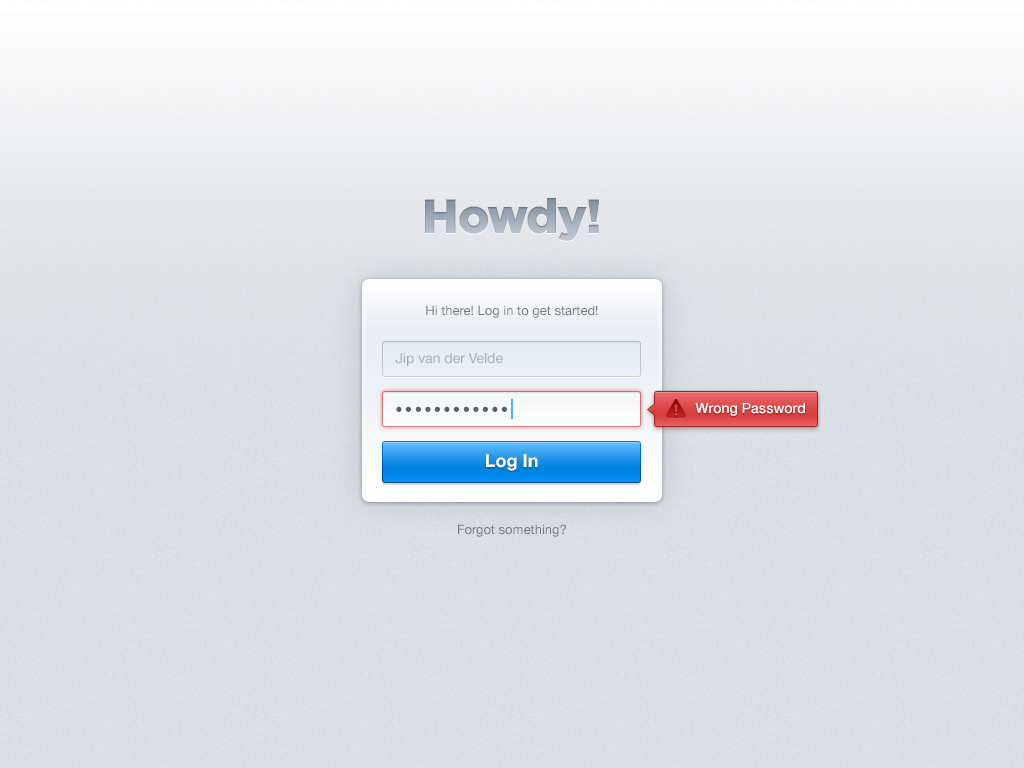
<style>
.page{position:relative;width:1024px;height:768px}
.page>*{position:absolute;margin:0}
.t1{font:48px "Gotham-Black";letter-spacing:-0.025em;color:#9ca9b7}
.t2{font:13px "HelveticaNeue";color:#717982}
.t3{font:14px "HelveticaNeue";color:#a1acb8}
.t4{font:24px "HelveticaNeue";letter-spacing:0.05em;color:#57626f}
.t5{font:14px "HelveticaNeue-Medium";color:#ffffff}
.t6{font:18px "HelveticaNeue-Bold";color:#ffffff}
</style>
<div class="page">
<p class="t1" style="left:425px;top:198px;width:174px;height:43px">Howdy!</p>
<p class="t2" style="left:426px;top:305px;width:172px;height:13px">Hi there! Log in to get started!</p>
<p class="t3" style="left:395px;top:353px;width:108px;height:13px">Jip van der Velde</p>
<p class="t4" style="left:396px;top:406px;width:111px;height:6px">••••••••••••</p>
<p class="t5" style="left:695px;top:403px;width:110px;height:13px">Wrong Password</p>
<p class="t6" style="left:486px;top:454px;width:52px;height:17px">Log In</p>
<p class="t2" style="left:458px;top:524px;width:108px;height:13px">Forgot something?</p>
</div>
